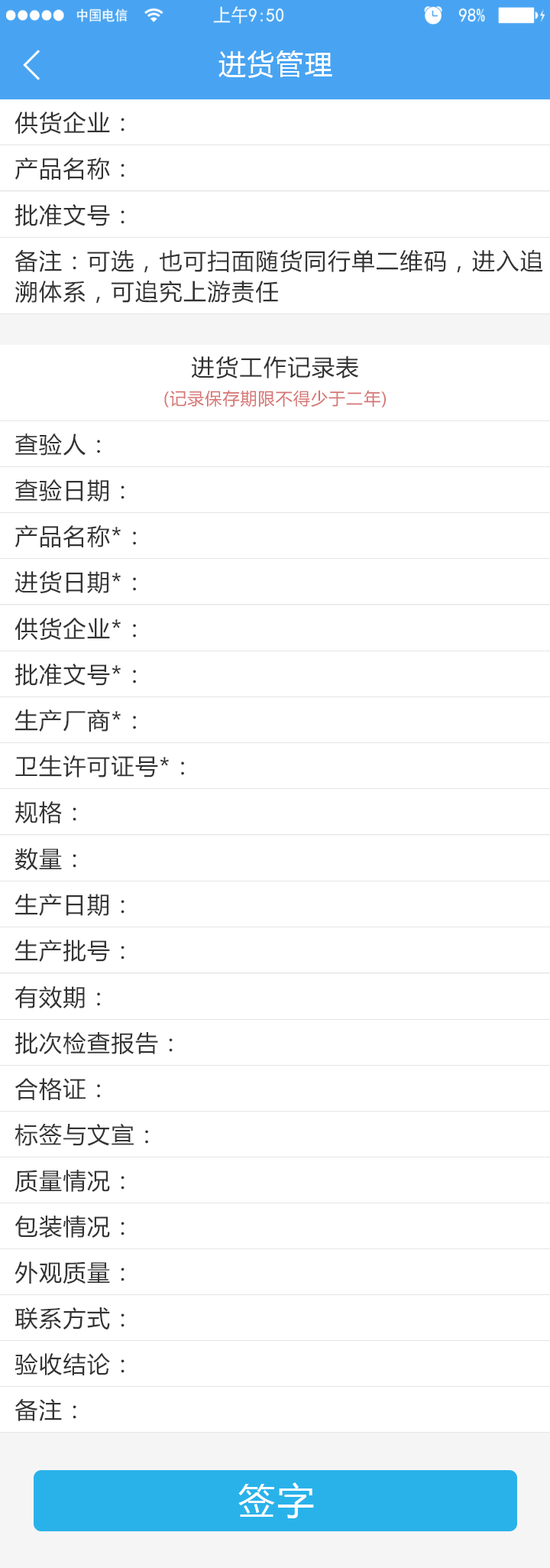
<style>
.page{position:relative;width:550px;height:1568px;background:#ffffff}
.page>*{position:absolute;margin:0}
.t1{font:27.5px "MicrosoftYaHei";letter-spacing:0.05em;color:#ffffff}
.t2{font:22.9px "MicrosoftYaHei";letter-spacing:0.05em;color:#333333}
.t3{font:22.9px/30.6px "MicrosoftYaHei";letter-spacing:0.05em;color:#333333}
.t4{font:16.8px "MicrosoftYaHei";letter-spacing:0.05em;color:#d67575}
.t5{font:36.7px "MicrosoftYaHei";letter-spacing:0.05em;color:#ffffff}
</style>
<div class="page">
<p class="t1" style="left:219px;top:50px;width:114px;height:28px">进货管理</p>
<p class="t2" style="left:15px;top:112px;width:110px;height:23px">供货企业：</p>
<p class="t2" style="left:15px;top:157px;width:110px;height:23px">产品名称：</p>
<p class="t2" style="left:15px;top:204px;width:110px;height:22px">批准文号：</p>
<p class="t3" style="left:15px;top:249px;width:529px;height:55px">备注：可选，也可扫面随货同行单二维码，进入追<br>溯体系，可追究上游责任</p>
<p class="t2" style="left:192px;top:355px;width:167px;height:24px">进货工作记录表</p>
<p class="t4" style="left:164px;top:390px;width:223px;height:17px">(记录保存期限不得少于二年)</p>
<p class="t2" style="left:15px;top:433px;width:85px;height:23px">查验人：</p>
<p class="t2" style="left:15px;top:479px;width:110px;height:23px">查验日期：</p>
<p class="t2" style="left:15px;top:525px;width:121px;height:22px">产品名称*：</p>
<p class="t2" style="left:15px;top:571px;width:121px;height:23px">进货日期*：</p>
<p class="t2" style="left:15px;top:618px;width:121px;height:23px">供货企业*：</p>
<p class="t2" style="left:15px;top:664px;width:121px;height:22px">批准文号*：</p>
<p class="t2" style="left:15px;top:709px;width:121px;height:23px">生产厂商*：</p>
<p class="t2" style="left:15px;top:755px;width:169px;height:23px">卫生许可证号*：</p>
<p class="t2" style="left:15px;top:801px;width:61px;height:22px">规格：</p>
<p class="t2" style="left:15px;top:848px;width:61px;height:23px">数量：</p>
<p class="t2" style="left:15px;top:894px;width:110px;height:23px">生产日期：</p>
<p class="t2" style="left:15px;top:940px;width:110px;height:22px">生产批号：</p>
<p class="t2" style="left:15px;top:986px;width:85px;height:23px">有效期：</p>
<p class="t2" style="left:15px;top:1032px;width:158px;height:22px">批次检查报告：</p>
<p class="t2" style="left:15px;top:1078px;width:85px;height:22px">合格证：</p>
<p class="t2" style="left:15px;top:1123px;width:133px;height:23px">标签与文宣：</p>
<p class="t2" style="left:15px;top:1170px;width:110px;height:23px">质量情况：</p>
<p class="t2" style="left:15px;top:1216px;width:110px;height:22px">包装情况：</p>
<p class="t2" style="left:15px;top:1261px;width:110px;height:23px">外观质量：</p>
<p class="t2" style="left:15px;top:1307px;width:110px;height:22px">联系方式：</p>
<p class="t2" style="left:15px;top:1352px;width:110px;height:23px">验收结论：</p>
<p class="t2" style="left:15px;top:1398px;width:61px;height:23px">备注：</p>
<p class="t5" style="left:239px;top:1482px;width:75px;height:36px">签字</p>
</div>
